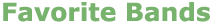
<style>
.page{position:relative;width:213px;height:25px;background:#ffffff}
.page>*{position:absolute;margin:0}
.t1{font:25px "Verdana-Bold";color:#78b36d}
</style>
<div class="page">
<p class="t1" style="left:3px;top:2px;width:207px;height:20px">Favorite Bands</p>
</div>
